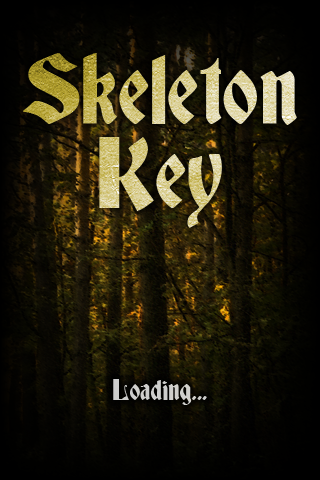
<style>
.page{position:relative;width:320px;height:480px}
.page>*{position:absolute;margin:0}
.t1{font:91px/84px "Deutsch-Gothic"}
.t2{font:27px "Deutsch-Gothic";color:#cececc}
</style>
<div class="page">
<p class="t1" style="left:23px;top:53px;width:274px;height:175px;text-align:center">Skeleton<br>Key</p>
<p class="t2" style="left:113px;top:379px;width:94px;height:26px">Loading...</p>
</div>
